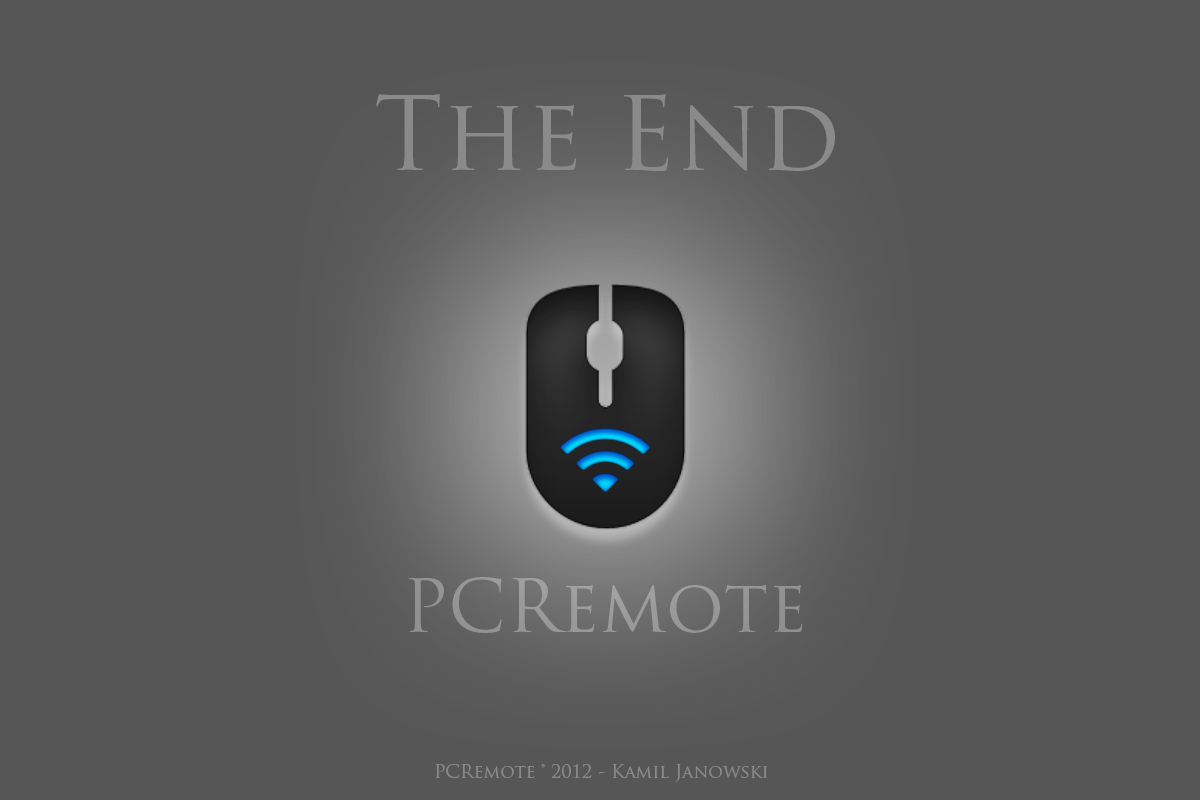
<style>
.page{position:relative;width:1200px;height:800px;background:#565656}
.page>*{position:absolute;margin:0}
.t1{font:100px "TrajanPro-Regular";color:#8a8a8a}
.t2{font:72px "TrajanPro-Regular";color:#8a8a8a}
.t3{font:18px "TrajanPro-Regular";color:#8a8a8a}
</style>
<div class="page">
<p class="t1" style="left:376px;top:94px;width:459px;height:77px">The End</p>
<p class="t2" style="left:408px;top:577px;width:395px;height:56px">PCRemote</p>
<p class="t3" style="left:435px;top:764px;width:333px;height:19px">PCRemote ® 2012 - Kamil Janowski</p>
</div>
